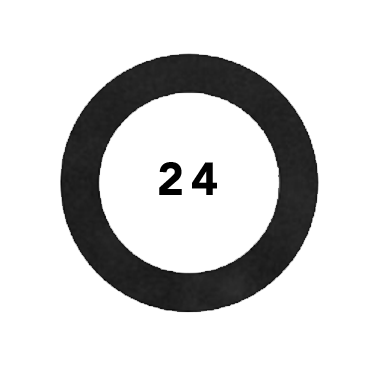
<style>
.page{position:relative;width:370px;height:366px;background:#ffffff}
.page>*{position:absolute;margin:0}
.t1{font:45.8px "Avenir-Black";letter-spacing:0.14em;color:#000000;text-transform:uppercase}
</style>
<div class="page">
<p class="t1" style="left:159px;top:162px;width:58px;height:33px">24</p>
</div>
